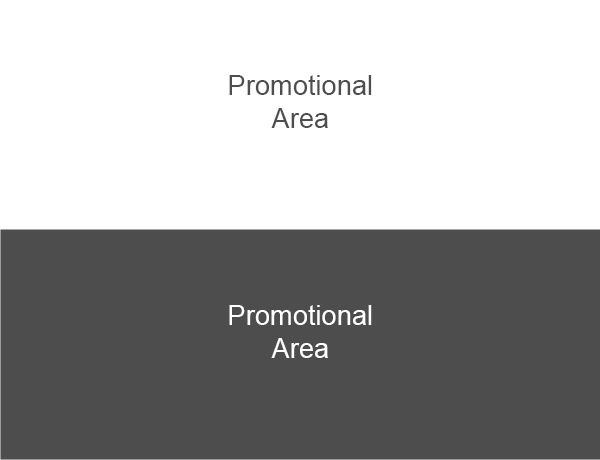
<style>
.page{position:relative;width:600px;height:460px;background:#ffffff}
.page>*{position:absolute;margin:0}
.t1{font:27.3px "ArialMT";color:#4e4e4e}
.t2{font:27.3px "ArialMT";color:#ffffff}
</style>
<div class="page">
<p class="t1" style="left:229px;top:75px;width:143px;height:53px;text-align:center">Promotional <br>Area</p>
<p class="t2" style="left:229px;top:305px;width:143px;height:53px;text-align:center">Promotional <br>Area</p>
</div>
